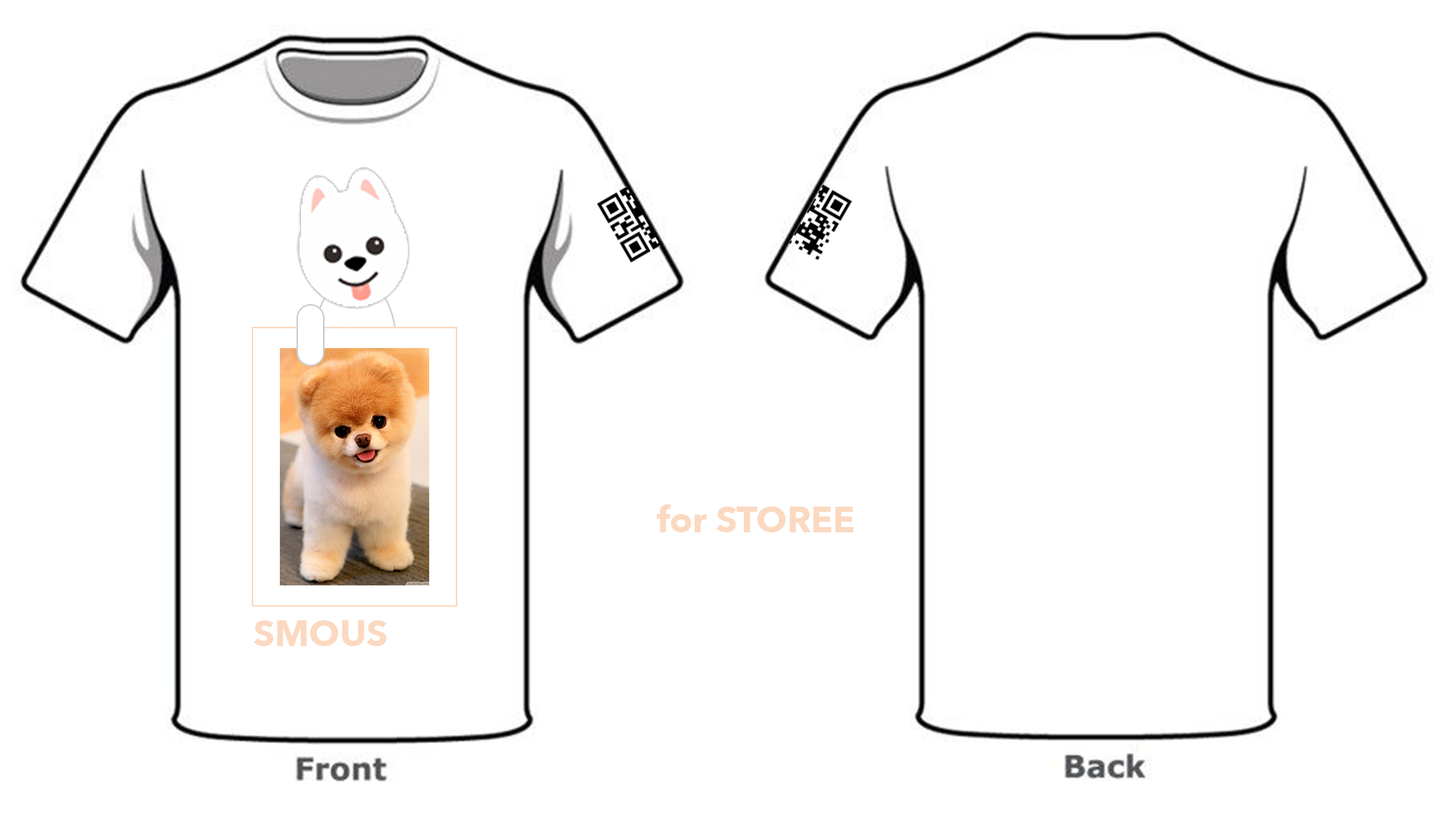
<style>
.page{position:relative;width:1456px;height:819px;background:#ffffff}
.page>*{position:absolute;margin:0}
.t1{font:36.1px "AvenirNext-Bold";color:#fbd9c0}
</style>
<div class="page">
<p class="t1" style="left:657px;top:504px;width:197px;height:28px">for STOREE</p>
<p class="t1" style="left:253px;top:620px;width:134px;height:26px">SMOUS</p>
</div>
